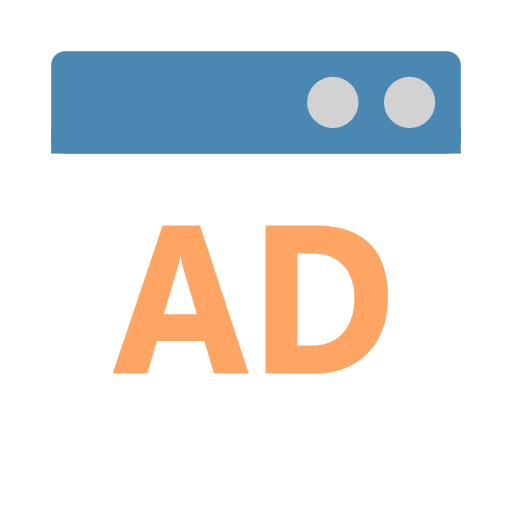
<style>
.page{position:relative;width:512px;height:512px;background:#ffffff}
.page>*{position:absolute;margin:0}
.t1{font:209.9px "Leelawadee-Bold";letter-spacing:-0.02em;color:#ffa563;font-weight:bold;scale:0.93 1}
</style>
<div class="page">
<p class="t1" style="left:113px;top:225px;width:275px;height:149px">AD</p>
</div>
